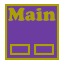
<style>
.page{position:relative;width:64px;height:64px;background:#6d3ca0}
.page>*{position:absolute;margin:0}
.t1{font:18px "CooperBlackStd";color:#aba000}
</style>
<div class="page">
<p class="t1" style="left:8px;top:7px;width:48px;height:14px">Main</p>
</div>
